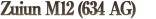
<style>
.page{position:relative;width:156px;height:19px;background:#ffffff}
.page>*{position:absolute;margin:0}
.t1{font:18px "RyuminPro-ExBold";letter-spacing:-0.08em;color:#4a3f32;font-weight:bold;scale:0.9 1}
</style>
<div class="page">
<p class="t1" style="left:0px;top:0px;width:136px;height:19px">Zuiun M12 (634 AG)</p>
</div>
